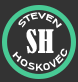
<style>
.page{position:relative;width:78px;height:82px;background:#333333}
.page>*{position:absolute;margin:0}
.t1{font:8.8px "Bahnschrift";color:#ffffff}
.t2{font:30px "BernardMT-Condensed";color:#ffffff}
.t3{font:10.1px "Bahnschrift";color:#ffffff;scale:0.87 1}
</style>
<div class="page">
<p class="t1" style="left:18px;top:12px;width:44px;height:16px;rotate:1deg">STEVEN</p>
<p class="t2" style="left:26px;top:29px;width:28px;height:25px">SH</p>
<p class="t3" style="left:12px;top:48px;width:55px;height:23px;rotate:-4deg">HOSKOVEC</p>
</div>
